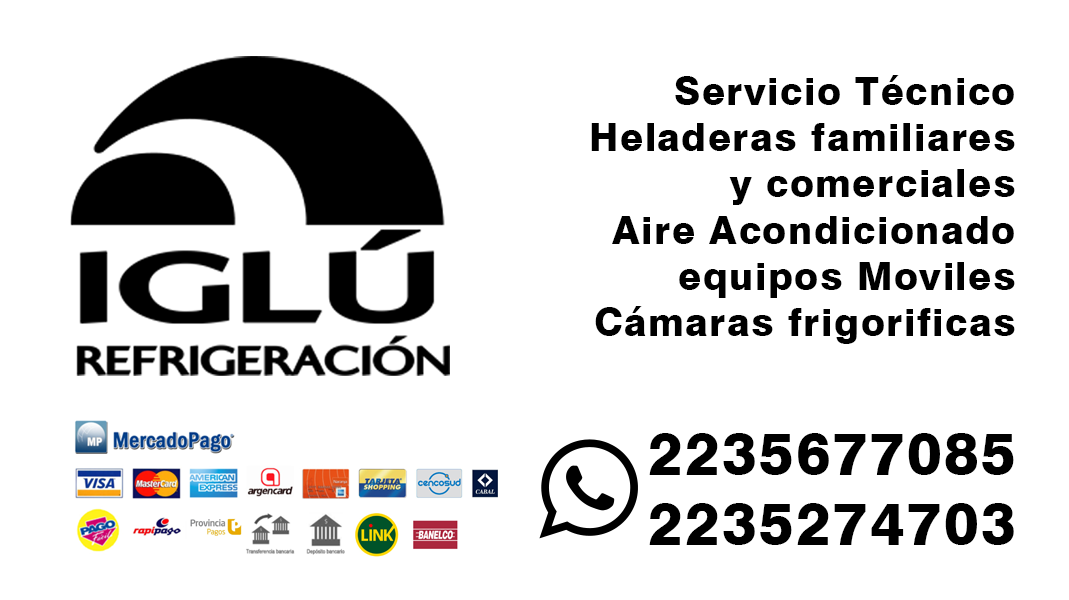
<style>
.page{position:relative;width:1069px;height:600px;background:#ffffff}
.page>*{position:absolute;margin:0}
.t1{font:38.5px "Swiss721BT-Heavy";letter-spacing:0.04em;color:#000000}
.t2{font:58.9px "Swiss721BT-Heavy";letter-spacing:0.04em;color:#000000}
</style>
<div class="page">
<p class="t1" style="left:591px;top:75px;width:424px;height:269px;text-align:right">Servicio Técnico<br>Heladeras familiares<br>y comerciales<br>Aire Acondicionado<br>equipos Moviles<br>Cámaras frigorificas</p>
<p class="t2" style="left:649px;top:433px;width:365px;height:112px">2235677085<br>2235274703</p>
</div>
